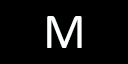
<style>
.page{position:relative;width:128px;height:64px;background:#000000}
.page>*{position:absolute;margin:0}
.t1{font:50px "Calibri";color:#feffff}
</style>
<div class="page">
<p class="t1" style="left:47px;top:16px;width:35px;height:32px">M</p>
</div>
